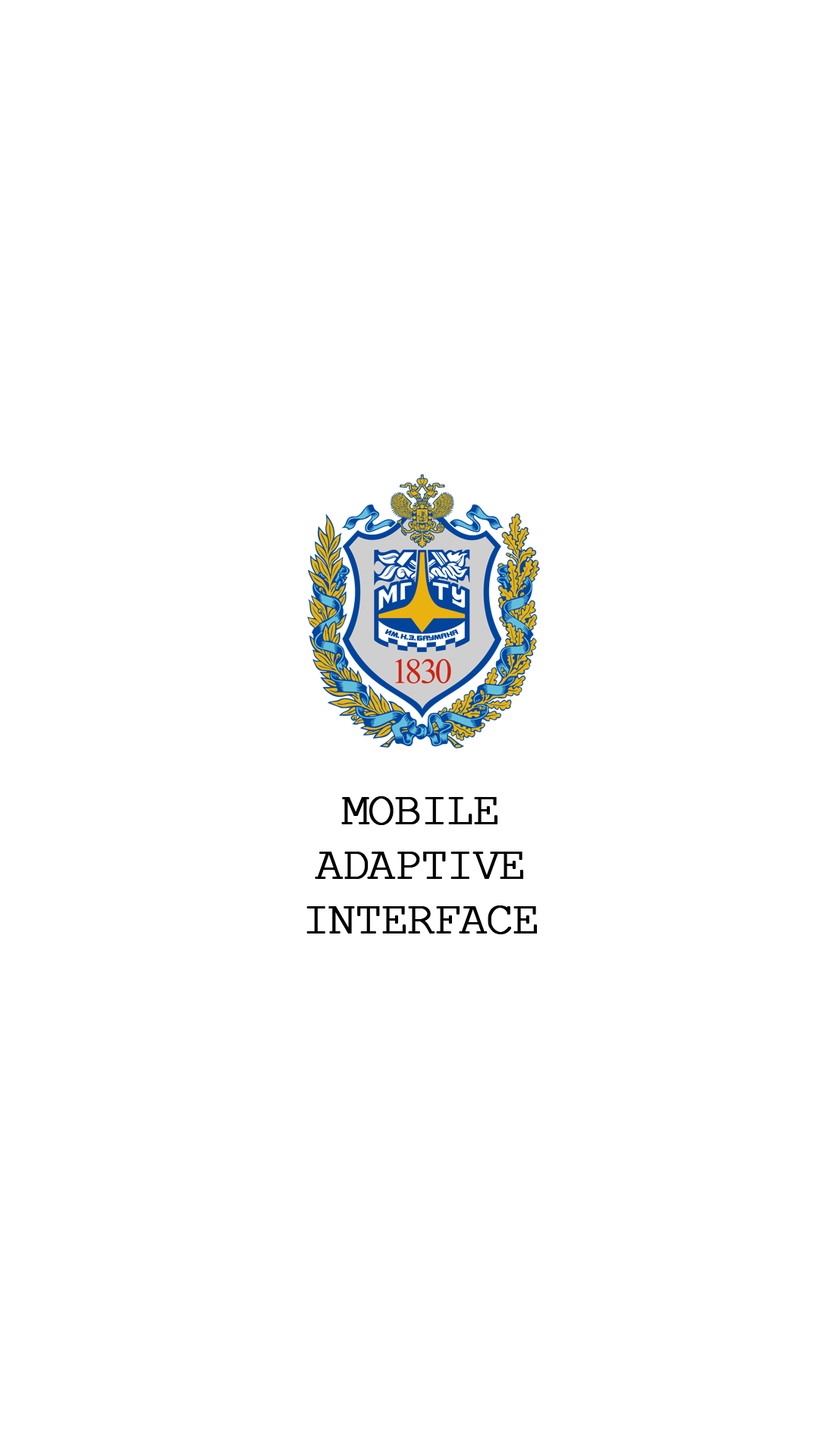
<style>
.page{position:relative;width:819px;height:1456px;background:#ffffff}
.page>*{position:absolute;margin:0}
.t1{font:45.5px "CourierNewPSMT";letter-spacing:-0.05em;color:#000000;font-weight:bold}
</style>
<div class="page">
<p class="t1" style="left:306px;top:796px;width:231px;height:138px;text-align:center">MOBILE<br>ADAPTIVE<br>INTERFACE</p>
</div>
